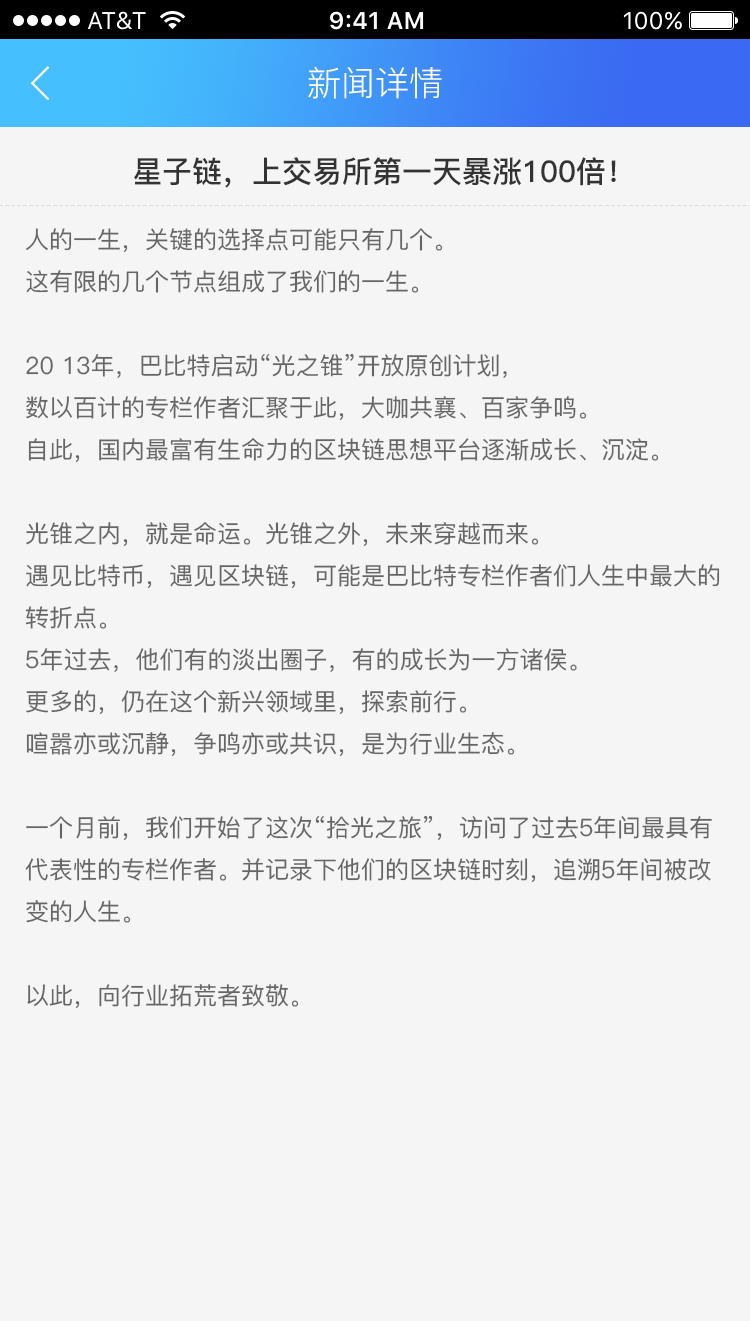
<style>
.page{position:relative;width:750px;height:1334px;background:#f5f5f5}
.page>*{position:absolute;margin:0}
.t1{font:34px "PingFang-SC-Regular";color:#ffffff}
.t2{font:30px "PingFang-SC-Bold";color:#333333}
.t3{font:24px "PingFang-SC-Medium";color:#666666}
</style>
<div class="page">
<p class="t1" style="left:308px;top:66px;width:134px;height:33px">新闻详情</p>
<p class="t2" style="left:134px;top:157px;width:482px;height:31px">星子链，上交易所第一天暴涨100倍！</p>
<p class="t3" style="left:25px;top:228px;width:695px;height:780px">人的一生，关键的选择点可能只有几个。<br>这有限的几个节点组成了我们的一生。<br><br>20 13年，巴比特启动“光之锥”开放原创计划，<br>数以百计的专栏作者汇聚于此，大咖共襄、百家争鸣。<br>自此，国内最富有生命力的区块链思想平台逐渐成长、沉淀。<br><br>光锥之内，就是命运。光锥之外，未来穿越而来。<br>遇见比特币，遇见区块链，可能是巴比特专栏作者们人生中最大的转折点。<br>5年过去，他们有的淡出圈子，有的成长为一方诸侯。<br>更多的，仍在这个新兴领域里，探索前行。<br>喧嚣亦或沉静，争鸣亦或共识，是为行业生态。<br><br>一个月前，我们开始了这次“拾光之旅”，访问了过去5年间最具有代表性的专栏作者。并记录下他们的区块链时刻，追溯5年间被改变的人生。 <br><br>以此，向行业拓荒者致敬。<br><br>今天，让我们一起走进光之锥2.0人物访问系列一：2013年度作者龚鸣。</p>
</div>
